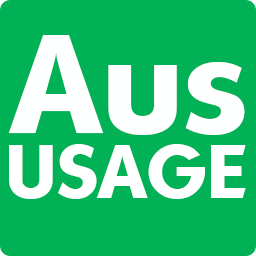
<style>
.page{position:relative;width:256px;height:256px;background:#00b156}
.page>*{position:absolute;margin:0}
.t1{font:136px "Ornitons-Serial-Bold";color:#feffff}
.t2{font:73.3px "Ornitons-Serial-Bold";color:#feffff}
</style>
<div class="page">
<p class="t1" style="left:8px;top:35px;width:237px;height:100px">Aus</p>
<p class="t2" style="left:9px;top:144px;width:237px;height:55px">USAGE</p>
</div>
